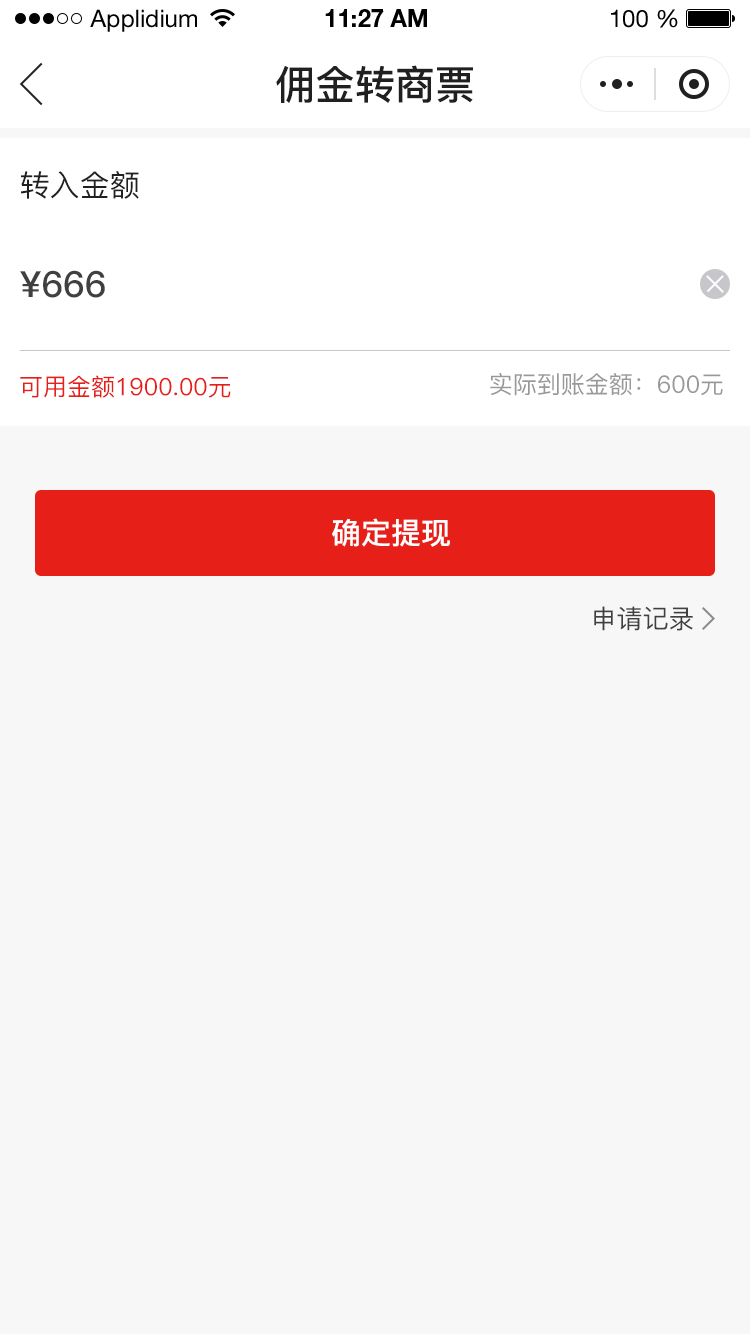
<style>
.page{position:relative;width:750px;height:1334px;background:#f7f7f7}
.page>*{position:absolute;margin:0}
.t1{font:24px "HelveticaNeueLTStd-Roman";color:#000000}
.t2{font:24px "HelveticaNeueLTStd-Bd";color:#000000}
.t3{font:40px "PingFang-SC-Bold";color:#202020;text-transform:uppercase}
.t4{font:30px "PingFang-SC-Medium";color:#202020;text-transform:uppercase}
.t5{font:36px "PingFang-SC-Bold";color:#404040;text-transform:uppercase}
.t6{font:24px "PingFang-SC-Medium";color:#e61f18;text-transform:uppercase}
.t7{font:24px "PingFang-SC-Medium";color:#999999;text-transform:uppercase}
.t8{font:30px "PingFang-SC-Bold";color:#ffffff;text-transform:uppercase}
.t9{font:26px "PingFang-SC-Medium";color:#404040;text-transform:uppercase}
</style>
<div class="page">
<p class="t1" style="left:90px;top:9px;width:107px;height:23px">Applidium</p>
<p class="t2" style="left:325px;top:9px;width:102px;height:18px">11:27 AM</p>
<p class="t1" style="left:611px;top:9px;width:67px;height:19px">100 %</p>
<p class="t3" style="left:276px;top:65px;width:197px;height:38px">佣金转商票</p>
<p class="t4" style="left:21px;top:171px;width:118px;height:28px">转入金额</p>
<p class="t5" style="left:20px;top:270px;width:85px;height:28px">¥666</p>
<p class="t6" style="left:20px;top:375px;width:211px;height:23px">可用金额1900.00元</p>
<p class="t7" style="left:490px;top:373px;width:233px;height:23px">实际到账金额：600元</p>
<p class="t8" style="left:332px;top:518px;width:118px;height:29px">确定提现</p>
<p class="t9" style="left:594px;top:606px;width:99px;height:25px">申请记录</p>
</div>
